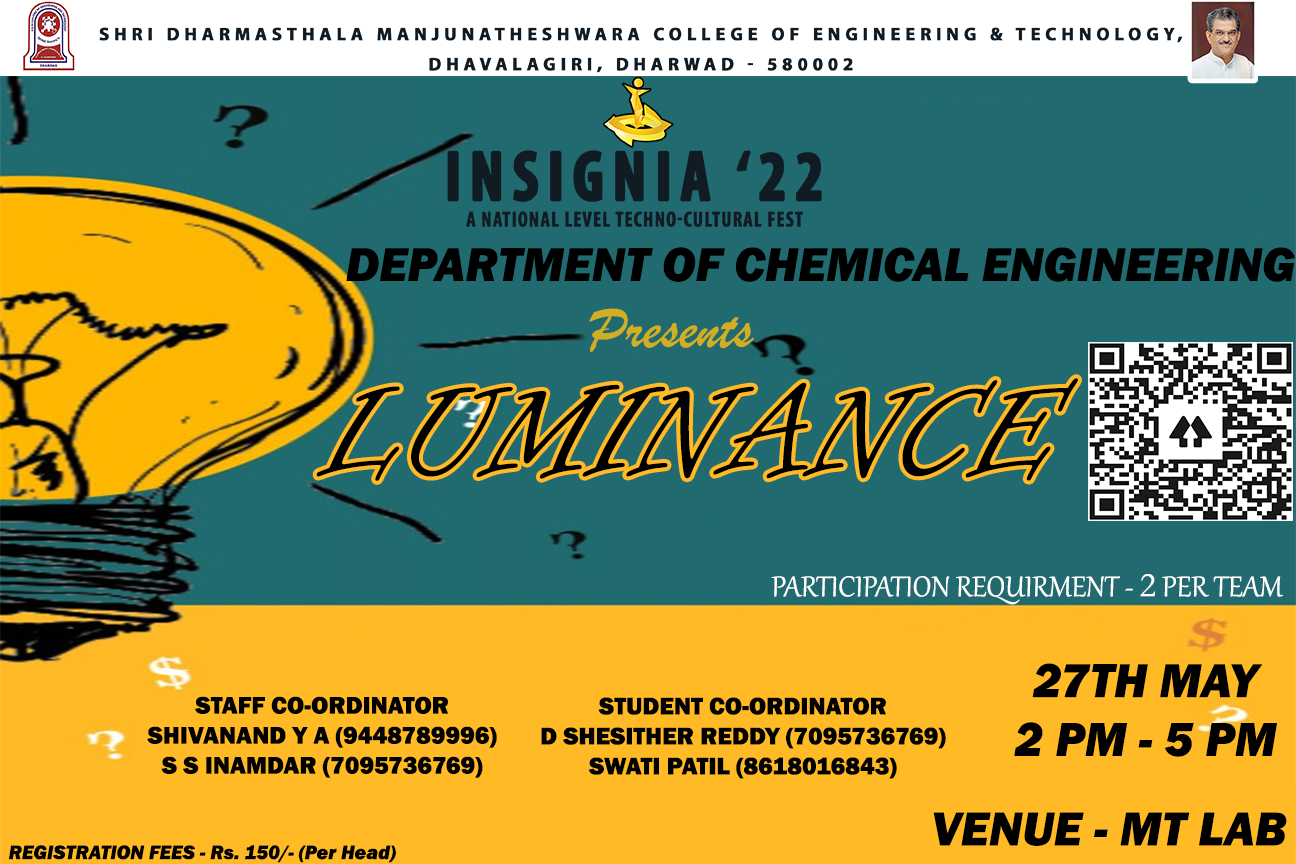
<style>
.page{position:relative;width:1296px;height:864px;background:#216a70}
.page>*{position:absolute;margin:0}
.t1{font:49px "FranklinGothic-HeavyItalic";color:#000000}
.t2{font:60px "BrushScriptMT";color:#d1af22}
.t3{font:145px "InformalRoman-Regular";color:#000000}
.t4{font:35px "Gabriola";color:#ffffff}
.t5{font:35px "Garamond";color:#ffffff}
.t6{font:25px "FranklinGothic-Heavy";color:#000000}
.t7{font:20px "FranklinGothic-HeavyItalic";color:#000000}
</style>
<div class="page">
<p class="t1" style="left:346px;top:247px;width:949px;height:35px">DEPARTMENT OF CHEMICAL ENGINEERING</p>
<p class="t2" style="left:589px;top:308px;width:165px;height:44px">Presents</p>
<p class="t3" style="left:316px;top:378px;width:762px;height:103px">LUMINANCE</p>
<p class="t4" style="left:771px;top:574px;width:512px;height:31px">PARTICIPATION REQUIRMENT - <span class="t5">2</span> PER TEAM</p>
<p class="t1" style="left:1014px;top:663px;width:263px;height:94px;text-align:center">27TH MAY <br>2 PM - 5 PM</p>
<p class="t6" style="left:147px;top:696px;width:350px;height:82px;text-align:center">STAFF CO-ORDINATOR<br>SHIVANAND Y A (9448789996)<br>S S INAMDAR (7095736769)</p>
<p class="t6" style="left:541px;top:697px;width:405px;height:82px;text-align:center">STUDENT CO-ORDINATOR<br>D SHESITHER REDDY (7095736769)<br>SWATI PATIL (8618016843)</p>
<p class="t1" style="left:933px;top:812px;width:354px;height:34px">VENUE - MT LAB</p>
<p class="t7" style="left:8px;top:845px;width:388px;height:18px">REGISTRATION FEES - Rs. 150/- (Per Head)</p>
</div>
